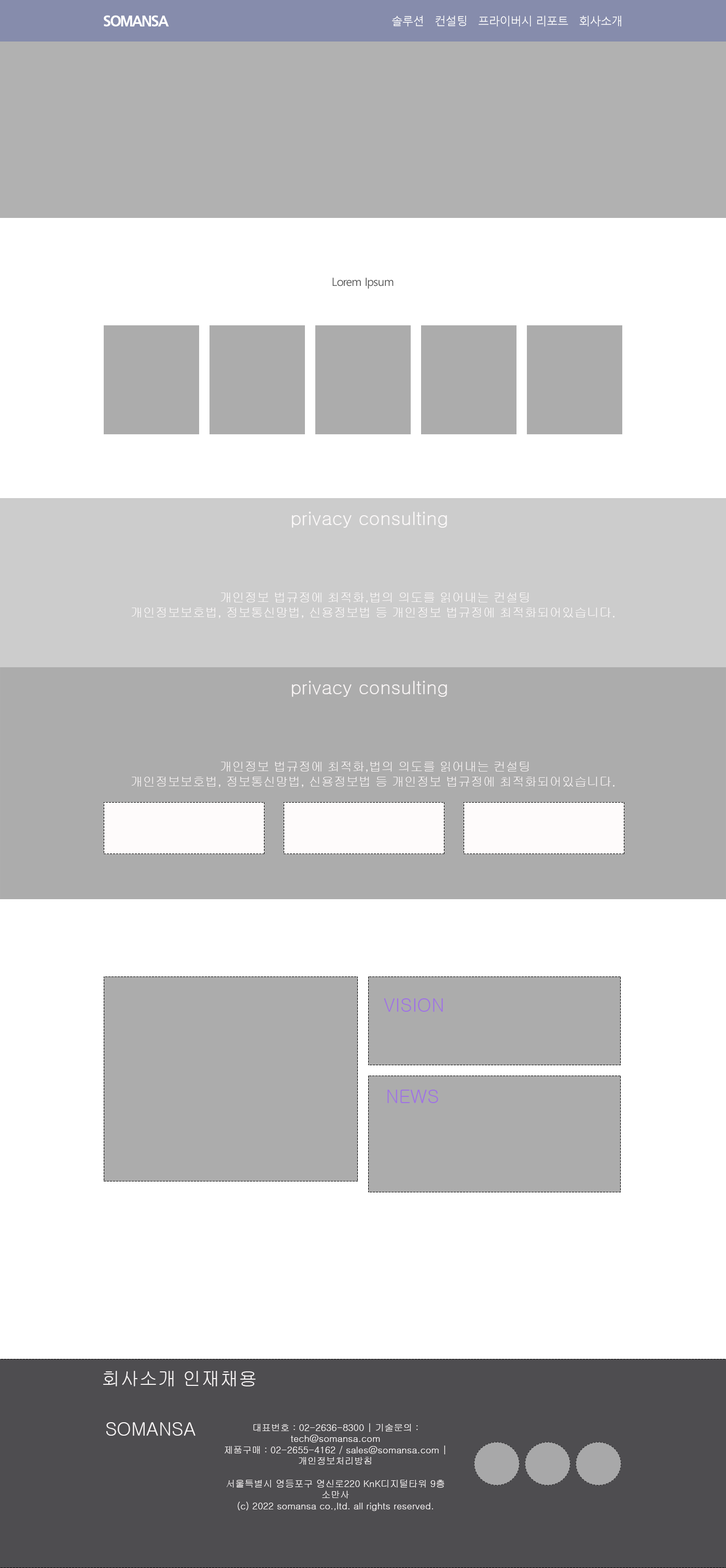
<style>
.page{position:relative;width:726px;height:1568px;background:#ffffff}
.page>*{position:absolute;margin:0}
.t1{font:15.6px "BRB";letter-spacing:-0.05em;color:#ffffff}
.t2{font:11.4px "MalgunGothic";letter-spacing:-0.05em;color:#ffffff}
.t3{font:11.4px "MalgunGothic";letter-spacing:-0.05em;color:#545454}
.t4{font:18.7px "Gulim";color:#f8f4f4}
.t5{font:12.5px "Gulim";color:#f8f4f4}
.t6{font:18.7px "Gulim";color:#9f72e3}
.t7{font:18.7px "Gulim";color:#f9f6f6}
.t8{font:9.3px "Gulim";color:#f9f6f6}
</style>
<div class="page">
<p class="t1" style="left:104px;top:15px;width:65px;height:11px">SOMANSA</p>
<p class="t2" style="left:392px;top:16px;width:230px;height:10px">솔루션   컨설팅   프라이버시 리포트   회사소개</p>
<p class="t3" style="left:333px;top:278px;width:61px;height:11px">Lorem Ipsum</p>
<p class="t4" style="left:292px;top:512px;width:155px;height:16px">privacy consulting</p>
<p class="t5" style="left:131px;top:593px;width:484px;height:25px;text-align:center">개인정보 법규정에 최적화,법의 의도를 읽어내는 컨설팅<br>개인정보보호법, 정보통신망법, 신용정보법 등 개인정보 법규정에 최적화되어있습니다.</p>
<p class="t4" style="left:292px;top:681px;width:155px;height:16px">privacy consulting</p>
<p class="t5" style="left:131px;top:762px;width:484px;height:26px;text-align:center">개인정보 법규정에 최적화,법의 의도를 읽어내는 컨설팅<br>개인정보보호법, 정보통신망법, 신용정보법 등 개인정보 법규정에 최적화되어있습니다.</p>
<p class="t6" style="left:384px;top:998px;width:59px;height:14px">VISION</p>
<p class="t6" style="left:388px;top:1090px;width:50px;height:13px">NEWS</p>
<p class="t7" style="left:103px;top:1371px;width:153px;height:15px;text-align:center">회사소개 인재채용<br><br>    회사소개<br>    인재채용<br>ghl<br>    회사소개<br>    인재채용</p>
<p class="t7" style="left:106px;top:1422px;width:90px;height:14px">SOMANSA</p>
<p class="t8" style="left:225px;top:1423px;width:221px;height:88px;text-align:center">대표번호 : 02-2636-8300 | 기술문의 : tech@somansa.com<br>제품구매 : 02-2655-4162 / sales@somansa.com |<br>개인정보처리방침<br><br>서울특별시 영등포구 영신로220 KnK디지털타워 9층 소만사<br>(c) 2022 somansa co.,ltd. all rights reserved.</p>
</div>
